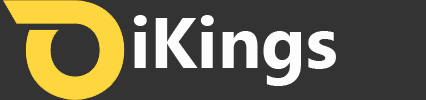
<style>
.page{position:relative;width:426px;height:100px;background:#333333}
.page>*{position:absolute;margin:0}
.t1{font:72px "SegoeUI-Bold";color:#fdfdfd}
</style>
<div class="page">
<p class="t1" style="left:133px;top:15px;width:203px;height:71px">iKings</p>
</div>
